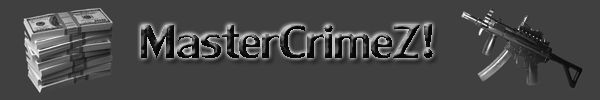
<style>
.page{position:relative;width:600px;height:100px;background:#404040}
.page>*{position:absolute;margin:0}
.t1{font:72px "LilyUPC";color:#161616}
</style>
<div class="page">
<p class="t1" style="left:141px;top:24px;width:292px;height:34px">MasterCrimeZ!</p>
</div>
